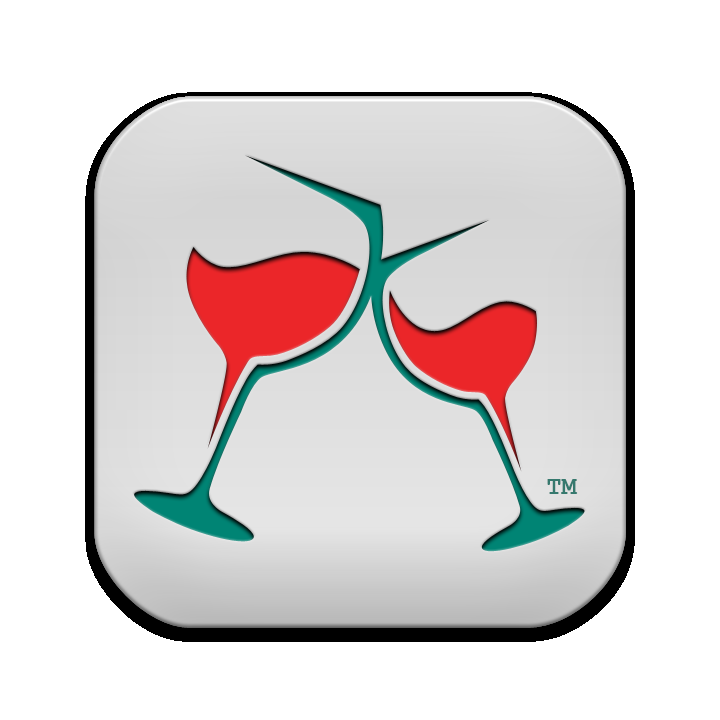
<style>
.page{position:relative;width:720px;height:720px;background:#ffffff}
.page>*{position:absolute;margin:0}
.t1{font:25px "CourierNewPS-BoldMT";color:#36796e}
</style>
<div class="page">
<p class="t1" style="left:547px;top:479px;width:31px;height:15px">TM</p>
</div>
